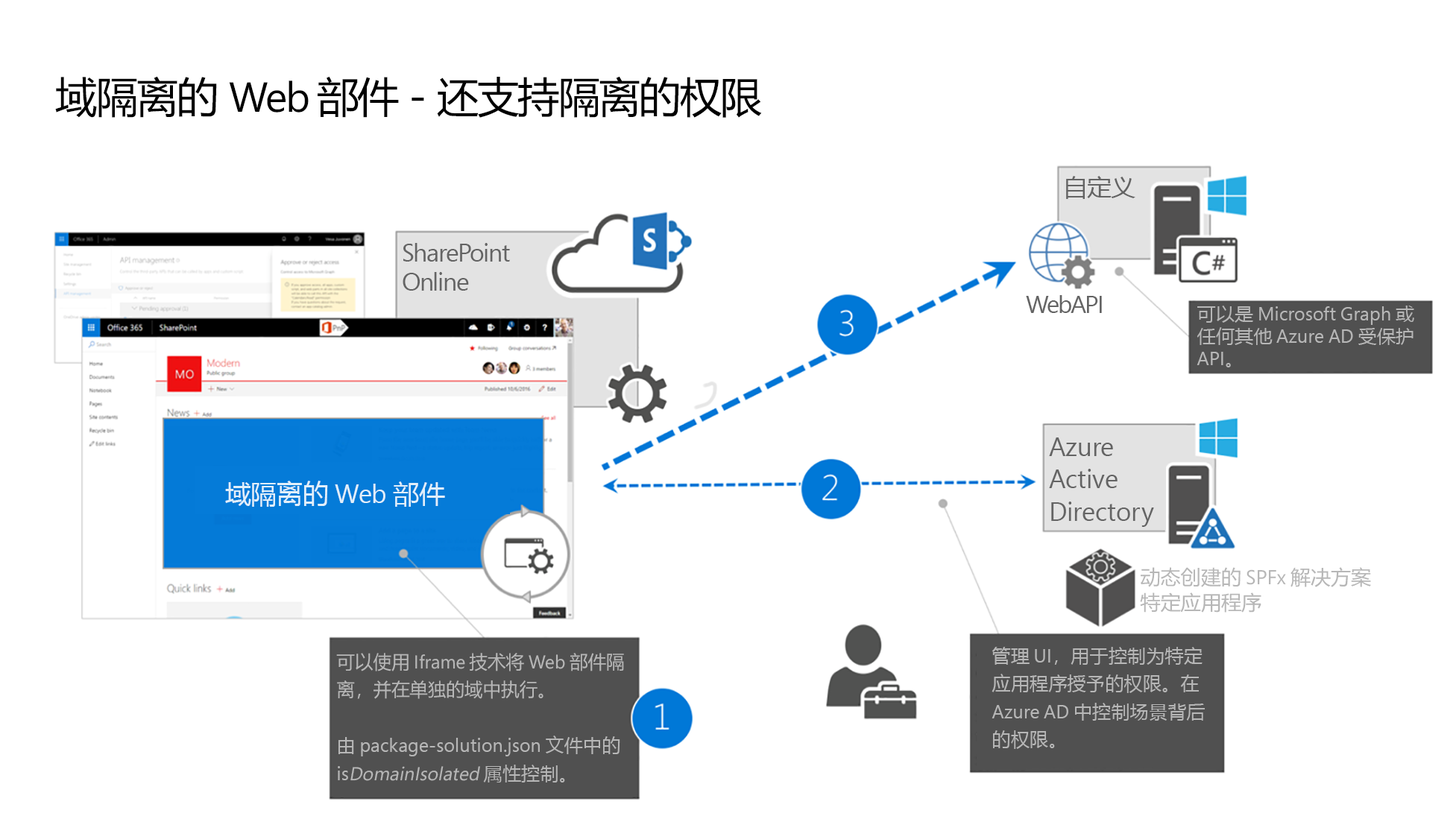
<style>
.page{position:relative;width:1456px;height:819px;background:#ffffff}
.page>*{position:absolute;margin:0}
.t1{font:41.9px "MicrosoftYaHei";letter-spacing:-0.034em;color:#000000}
.t2{font:41.9px "SegoePro";letter-spacing:-0.034em;color:#000000}
.t3{font:24.5px "MicrosoftYaHei";letter-spacing:-0.02em;color:#646464}
.t4{font:25px/29.5px "SegoePro";letter-spacing:-0.044em;color:#646464}
.t5{font:24.8px "SegoePro";letter-spacing:-0.064em;color:#646464}
.t6{font:18.6px "SegoePro";color:#b7b7b7}
.t7{font:18.6px "MicrosoftYaHei";color:#b7b7b7}
.t8{font:26.1px/32.6px "SegoePro";letter-spacing:-0.01em;color:#646464}
.t9{font:25.9px "MicrosoftYaHei";color:#e1effa}
.t10{font:25.9px "SegoePro";color:#e1effa}
.t11{font:20.2px/24.8px "MicrosoftYaHei";letter-spacing:-0.01em;color:#b7b7b7}
.t12{font:20.2px/24.8px "SegoePro";letter-spacing:-0.01em;color:#b7b7b7}
.t13{font:18.6px/28px "SegoePro";color:#b7b7b7}
.t14{font:18.6px/28px "MicrosoftYaHei";color:#b7b7b7}
.t15{font:18.6px/28px "SegoePro";color:#b7b7b7;font-style:italic}
</style>
<div class="page">
<p class="t1" style="left:55px;top:76px;width:707px;height:42px">域隔离的 <span class="t2">Web </span>部件 - 还支持隔离的权限</p>
<p class="t3" style="left:1066px;top:176px;width:69px;height:23px">自定义</p>
<p class="t4" style="left:402px;top:243px;width:108px;height:48px">SharePoint Online</p>
<p class="t5" style="left:1026px;top:295px;width:76px;height:18px">WebAPI</p>
<p class="t6" style="left:1196px;top:306px;width:218px;height:61px"><span class="t7">可以是</span> Microsoft Graph <span class="t7">或任何其他</span> Azure AD <span class="t7">受保护</span> API<span class="t7">。</span></p>
<p class="t8" style="left:1049px;top:438px;width:105px;height:89px">Azure Active Directory</p>
<p class="t9" style="left:225px;top:481px;width:220px;height:26px">域隔离的<span class="t10"> Web </span>部件</p>
<p class="t11" style="left:1140px;top:567px;width:231px;height:46px">动态创建的<span class="t12"> SPFx </span>解决方案特定应用程序</p>
<p class="t13" style="left:336px;top:653px;width:288px;height:130px"><span class="t14">可以使用</span> Iframe <span class="t14">技术将</span> Web <span class="t14">部件隔离，并在单独的域中执行。</span><br><br><span class="t14">由</span> package-solution.json <span class="t14">文件中的</span> is<span class="t15">DomainIsolated </span><span class="t14">属性控制。</span></p>
<p class="t14" style="left:991px;top:647px;width:214px;height:102px">管理<span class="t13"> UI</span>，用于控制为特定应用程序授予的权限。在<span class="t13"> Azure AD </span>中控制场景背后的权限。</p>
</div>
